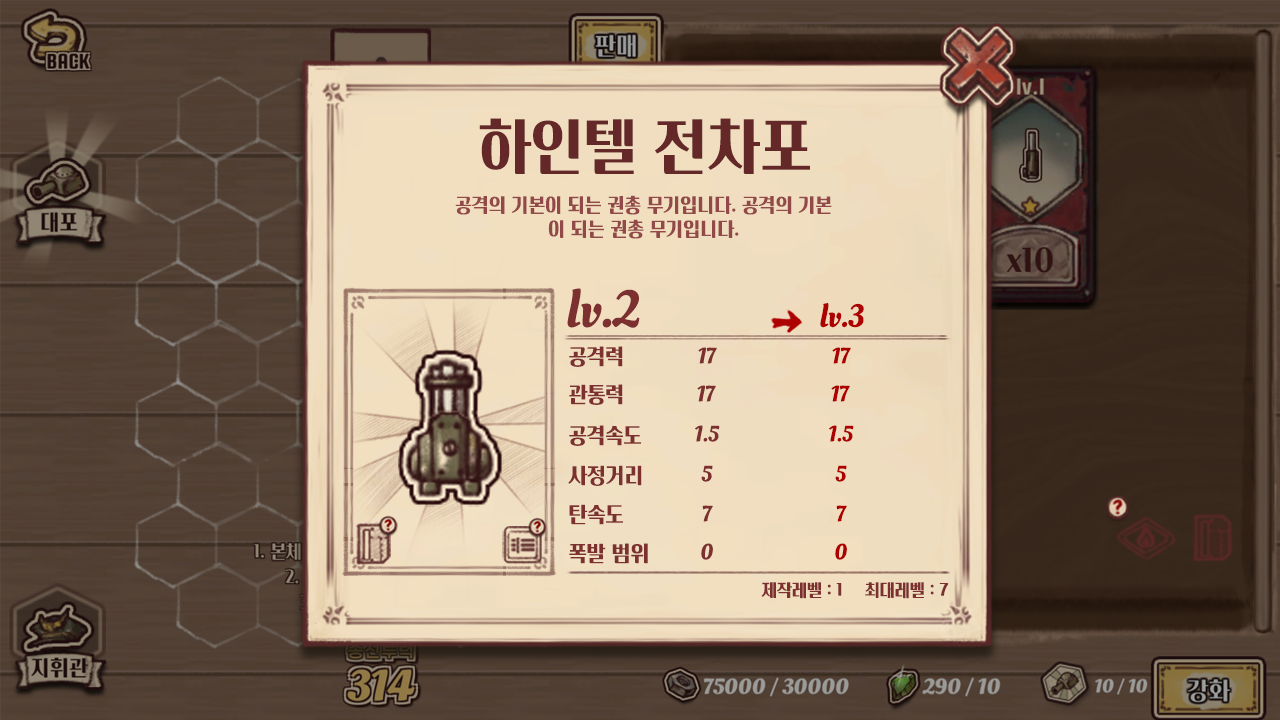
<style>
.page{position:relative;width:1280px;height:720px}
.page>*{position:absolute;margin:0}
.t1{font:62px "Cafe24Dangdanghae";color:#642828}
.t2{font:20px "Cafe24Dangdanghae";color:#924949}
.t3{font:52px "OleoScriptSwashCaps-Regular";color:#7d3030}
.t4{font:32px "OleoScriptSwashCaps-Regular";color:#ad0000}
.t5{font:22px "Cafe24Dangdanghae";color:#7d3030}
.t6{font:22px "OleoScriptSwashCaps-Regular";color:#7d3030}
.t7{font:22px "OleoScriptSwashCaps-Regular";color:#ad0000}
.t8{font:17.6px "Cafe24Dangdanghae";color:#7d3030}
</style>
<div class="page">
<p class="t1" style="left:479px;top:118px;width:331px;height:56px">하인텔 전차포</p>
<p class="t2" style="left:455px;top:195px;width:377px;height:44px;text-align:center">공격의 기본이 되는 권총 무기입니다. 공격의 기본<br>이 되는 권총 무기입니다.</p>
<p class="t3" style="left:567px;top:288px;width:73px;height:40px">lv.2</p>
<p class="t4" style="left:820px;top:303px;width:44px;height:25px">lv.3</p>
<p class="t5" style="left:569px;top:346px;width:54px;height:21px">공격력</p>
<p class="t6" style="left:698px;top:347px;width:19px;height:17px">17</p>
<p class="t7" style="left:832px;top:347px;width:19px;height:17px">17</p>
<p class="t5" style="left:569px;top:384px;width:54px;height:21px">관통력</p>
<p class="t6" style="left:697px;top:385px;width:19px;height:17px">17</p>
<p class="t7" style="left:831px;top:385px;width:19px;height:17px">17</p>
<p class="t5" style="left:569px;top:425px;width:72px;height:21px">공격속도</p>
<p class="t6" style="left:695px;top:425px;width:25px;height:17px">1.5</p>
<p class="t7" style="left:829px;top:425px;width:25px;height:17px">1.5</p>
<p class="t5" style="left:568px;top:465px;width:74px;height:21px">사정거리</p>
<p class="t6" style="left:701px;top:465px;width:12px;height:17px">5</p>
<p class="t7" style="left:835px;top:465px;width:12px;height:17px">5</p>
<p class="t5" style="left:569px;top:504px;width:54px;height:21px">탄속도</p>
<p class="t6" style="left:702px;top:505px;width:11px;height:17px">7</p>
<p class="t7" style="left:836px;top:505px;width:11px;height:17px">7</p>
<p class="t5" style="left:569px;top:543px;width:79px;height:21px">폭발 범위</p>
<p class="t6" style="left:701px;top:543px;width:12px;height:17px">0</p>
<p class="t7" style="left:835px;top:543px;width:12px;height:17px">0</p>
<p class="t8" style="left:761px;top:582px;width:81px;height:17px">제작레벨 : 1</p>
<p class="t8" style="left:865px;top:582px;width:84px;height:17px">최대레벨 : 7</p>
</div>
